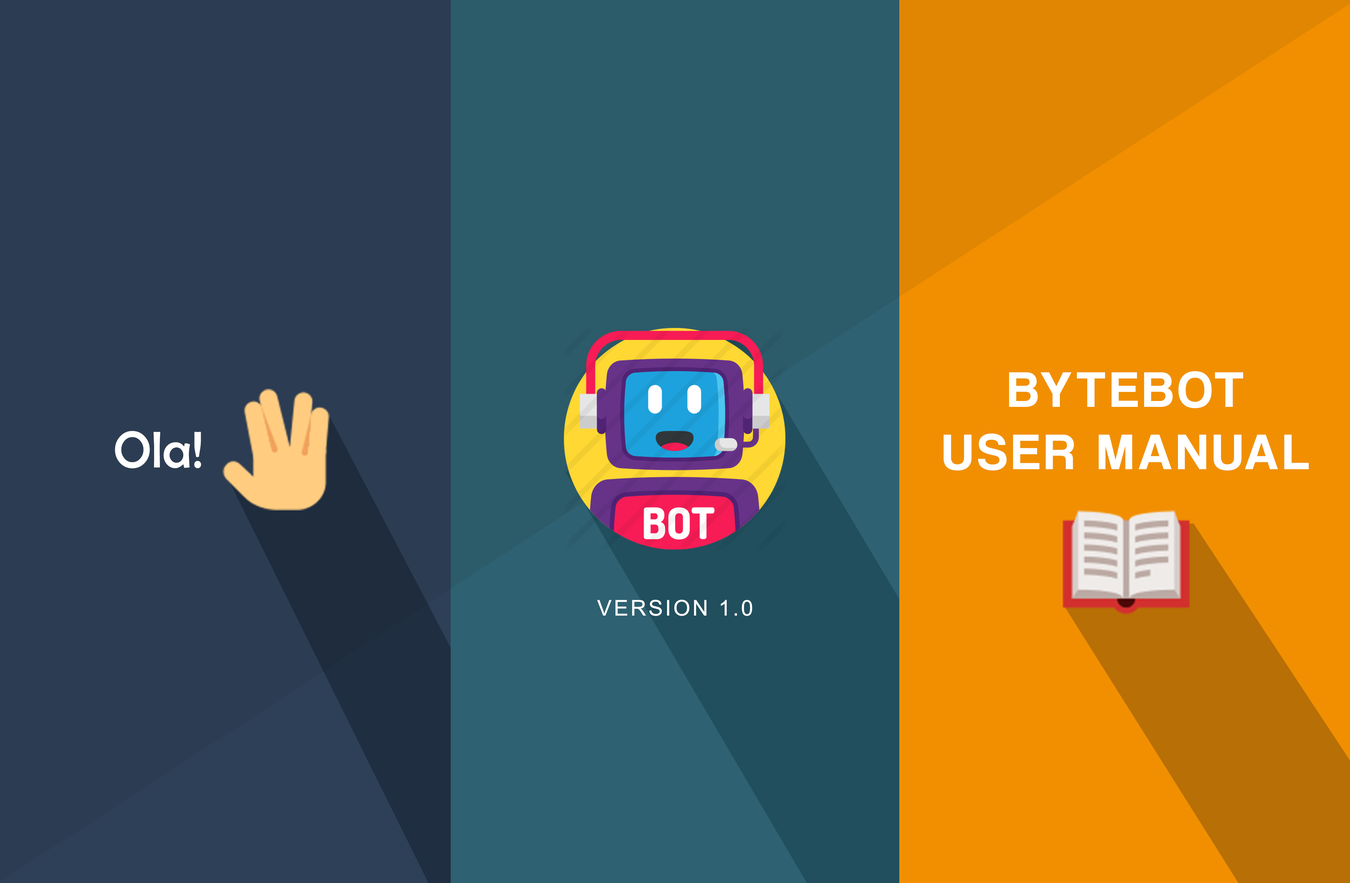
<style>
.page{position:relative;width:1350px;height:883px;background:#2c3c52}
.page>*{position:absolute;margin:0}
.t1{font:51.9px "CoolveticaRg-Regular";letter-spacing:0.1em;color:#ffffff}
.t2{font:51.9px "BerlinSansFB-Reg";color:#ffffff}
.t3{font:21.7px "ArialMT";letter-spacing:0.1em;color:#ffffff}
</style>
<div class="page">
<p class="t1" style="left:944px;top:371px;width:365px;height:100px;text-align:center">BYTEBOT<br>USER MANUAL</p>
<p class="t2" style="left:115px;top:431px;width:86px;height:38px">Ola!</p>
<p class="t3" style="left:597px;top:600px;width:155px;height:16px">VERSION 1.0</p>
</div>
